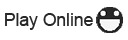
<style>
.page{position:relative;width:128px;height:40px;background:#ffffff}
.page>*{position:absolute;margin:0}
.t1{font:17.5px "ArialMT";color:#282828}
</style>
<div class="page">
<p class="t1" style="left:5px;top:13px;width:88px;height:17px">Play Online</p>
</div>
